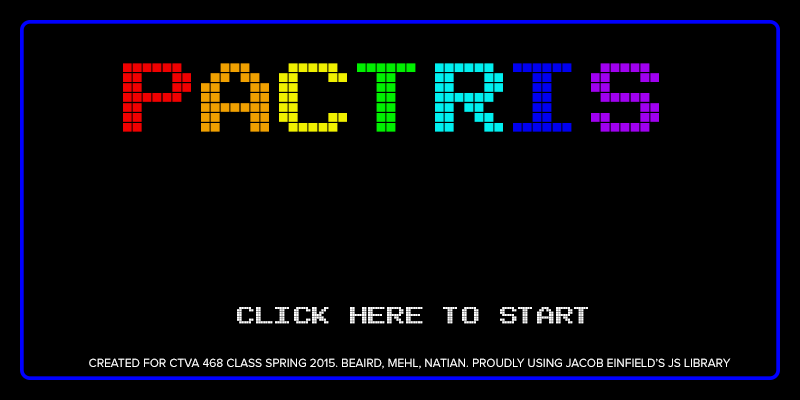
<style>
.page{position:relative;width:800px;height:400px;background:#000000}
.page>*{position:absolute;margin:0}
.t1{font:150px "Arcade";color:#f00000}
.t2{font:150px "Arcade";color:#f0a000}
.t3{font:150px "Arcade";color:#f0f000}
.t4{font:150px "Arcade";color:#00f000}
.t5{font:150px "Arcade";color:#00f0f0}
.t6{font:150px "Arcade";color:#0000f0}
.t7{font:150px "Arcade";color:#a000f0}
.t8{font:36px "Arcade";color:#ffffff}
.t9{font:12px "ProximaNova-Regular";color:#ffffff}
</style>
<div class="page">
<p class="t1" style="left:123px;top:63px;width:536px;height:69px">P<span class="t2">A</span><span class="t3">C</span><span class="t4">T</span><span class="t5">R</span><span class="t6">I</span><span class="t7">S</span></p>
<p class="t8" style="left:237px;top:307px;width:351px;height:17px">CLICK HERE TO START</p>
<p class="t9" style="left:89px;top:358px;width:642px;height:11px">CREATED FOR CTVA 468 CLASS SPRING 2015. BEAIRD, MEHL, NATIAN. PROUDLY USING JACOB EINFIELD’S JS LIBRARY</p>
</div>
